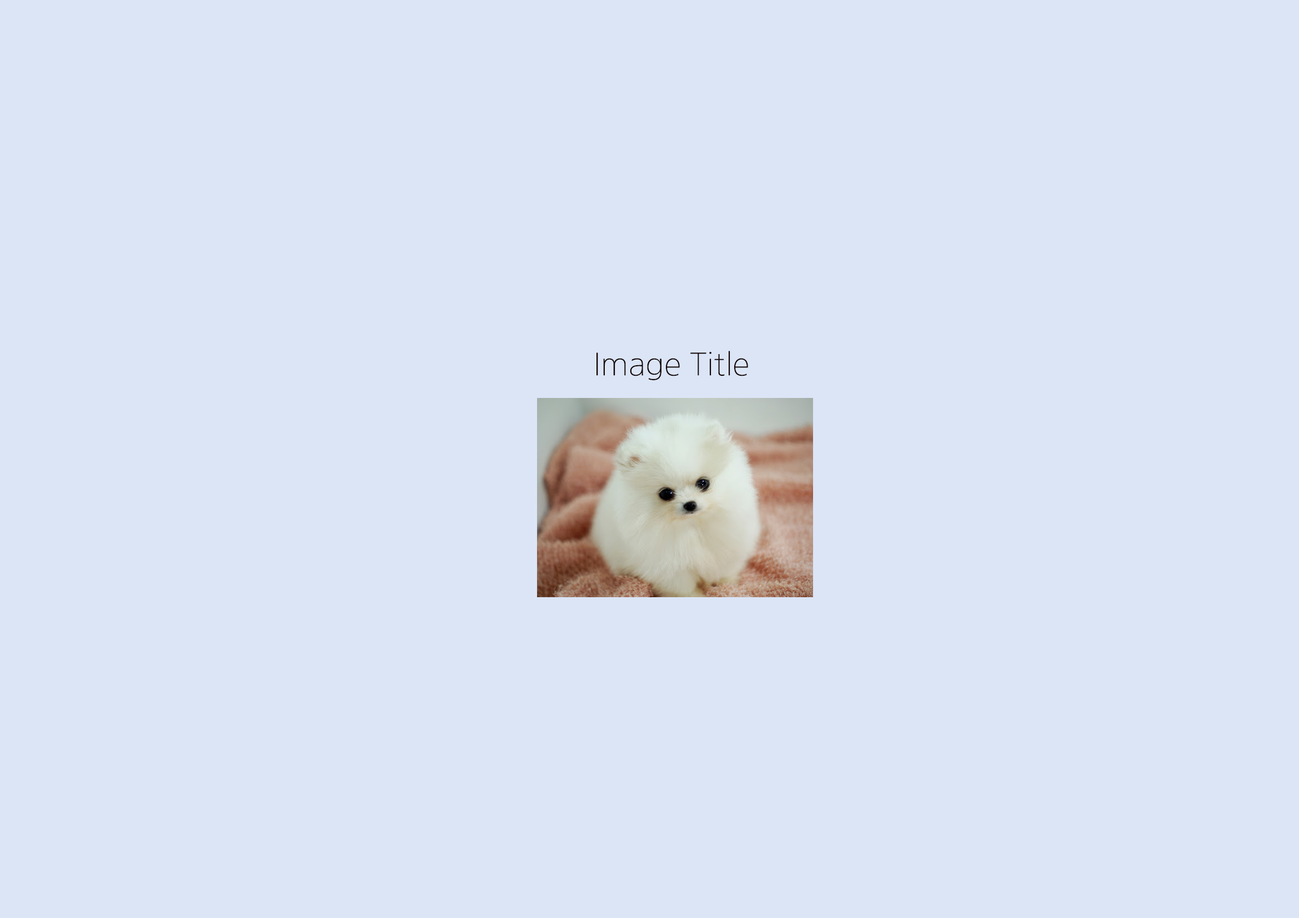
<style>
.page{position:relative;width:1299px;height:918px;background:#dbe5f6}
.page>*{position:absolute;margin:0}
.t1{font:30.8px "NanumGothicOTFLight";color:#110303}
</style>
<div class="page">
<p class="t1" style="left:596px;top:351px;width:152px;height:29px">Image Title</p>
</div>
